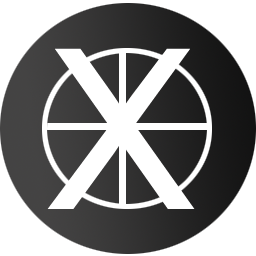
<style>
.page{position:relative;width:256px;height:256px;background:#ffffff}
.page>*{position:absolute;margin:0}
.t1{font:223px "ArialMT";color:#ffffff}
</style>
<div class="page">
<p class="t1" style="left:47px;top:48px;width:148px;height:161px">X</p>
</div>
